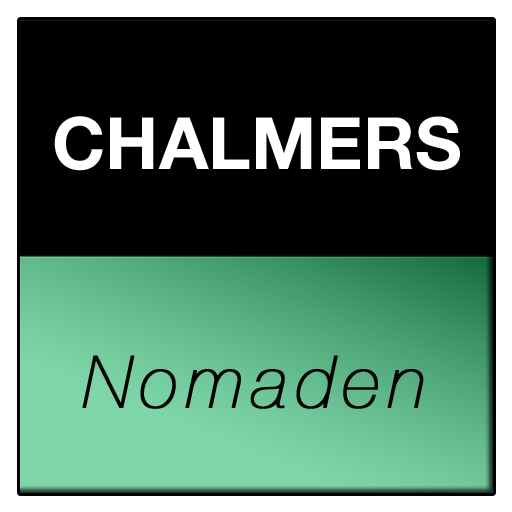
<style>
.page{position:relative;width:512px;height:512px;background:#000000}
.page>*{position:absolute;margin:0}
.t1{font:72px "HelveticaNeue-Bold";color:#ffffff}
.t2{font:72px "HelveticaNeue-UltraLightItalic";letter-spacing:0.1em;color:#000000;font-weight:bold}
</style>
<div class="page">
<p class="t1" style="left:54px;top:116px;width:406px;height:55px">CHALMERS</p>
<p class="t2" style="left:82px;top:355px;width:342px;height:54px">Nomaden</p>
</div>
